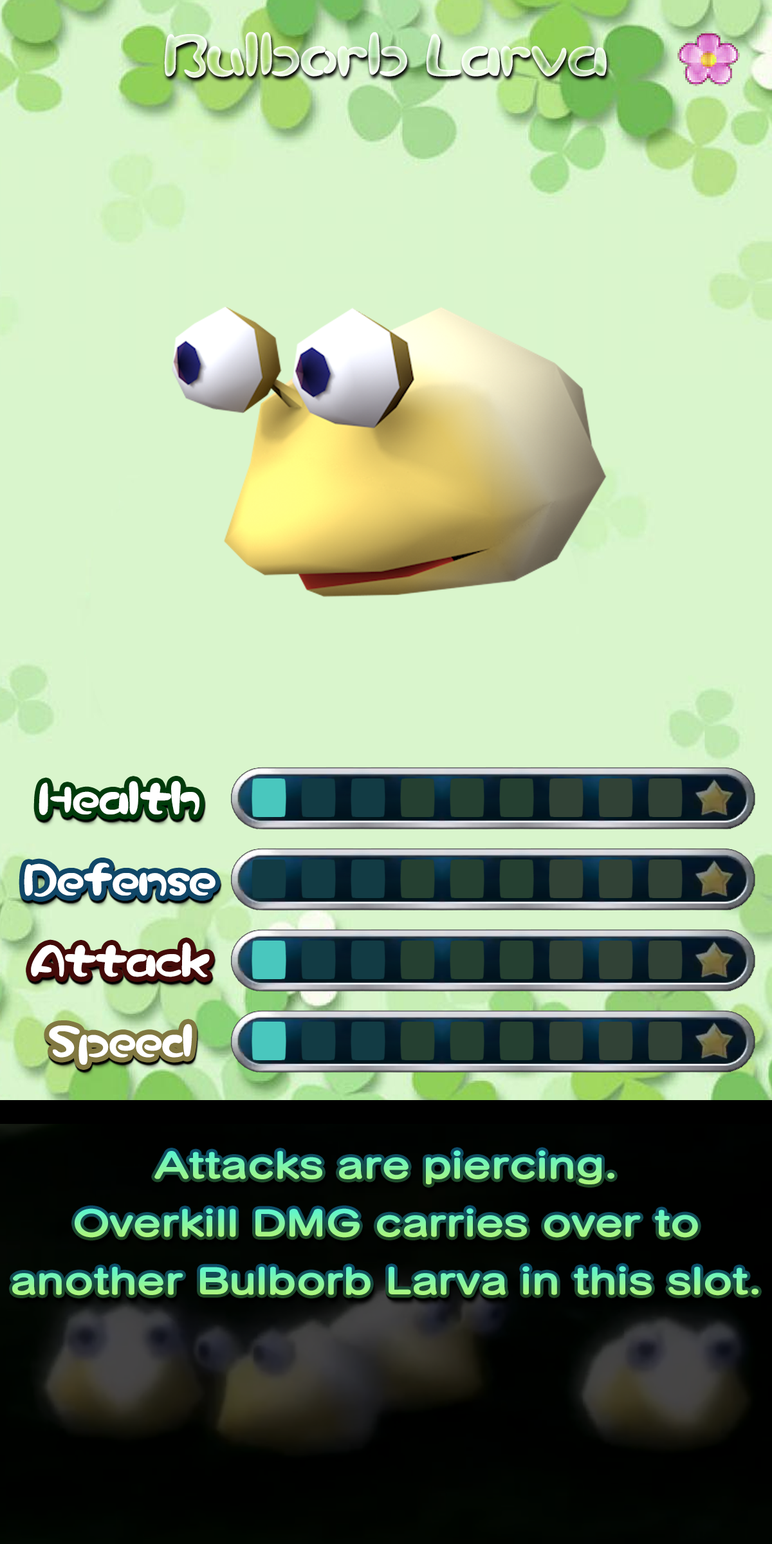
<style>
.page{position:relative;width:772px;height:1544px;background:#d9f5cc}
.page>*{position:absolute;margin:0}
.t1{font:103px "Pikmin"}
.t2{font:77.2px "Pikmin";color:#ffffff}
.t3{font:34.7px "SeuratPro-B";scale:1.2 1}
</style>
<div class="page">
<p class="t1" style="left:164px;top:32px;width:443px;height:46px">Bulborb Larva</p>
<p class="t2" style="left:39px;top:781px;width:160px;height:34px">Health</p>
<p class="t2" style="left:24px;top:863px;width:192px;height:34px">Defense</p>
<p class="t2" style="left:31px;top:943px;width:179px;height:34px">Attack</p>
<p class="t2" style="left:49px;top:1024px;width:143px;height:41px">Speed</p>
<p class="t3" style="left:154px;top:1151px;width:461px;height:34px">Attacks are piercing.</p>
<p class="t3" style="left:75px;top:1208px;width:623px;height:30px">Overkill DMG carries over to</p>
<p class="t3" style="left:12px;top:1266px;width:747px;height:30px">another Bulborb Larva in this slot.</p>
</div>
